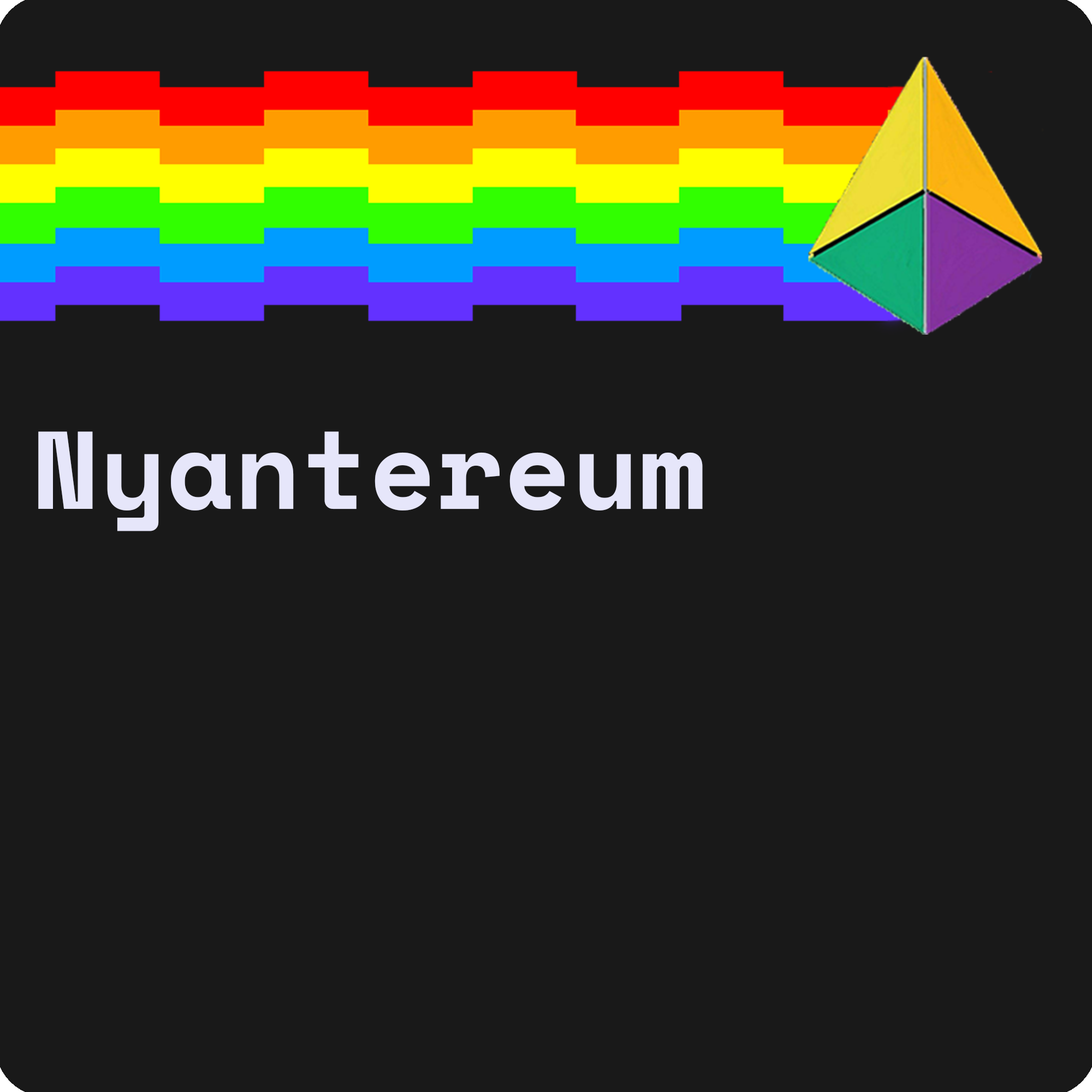
<style>
.page{position:relative;width:1092px;height:1092px;background:#191919}
.page>*{position:absolute;margin:0}
.t1{font:110.2px "SpaceMono-Bold";color:#e6e6fa}
</style>
<div class="page">
<p class="t1" style="left:38px;top:431px;width:665px;height:100px">Nyantereum</p>
</div>
